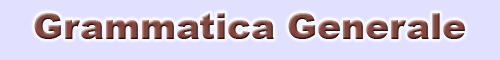
<style>
.page{position:relative;width:500px;height:60px;background:#e1e1ff}
.page>*{position:absolute;margin:0}
.t1{font:36px "Arial-Black"}
</style>
<div class="page">
<p class="t1" style="left:34px;top:13px;width:431px;height:26px">Grammatica Generale</p>
</div>
